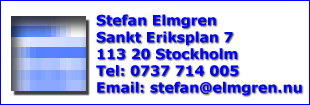
<style>
.page{position:relative;width:310px;height:105px;background:#ffffff}
.page>*{position:absolute;margin:0}
.t1{font:14px "Verdana-Bold";color:#0000ff}
</style>
<div class="page">
<p class="t1" style="left:96px;top:14px;width:206px;height:82px">Stefan Elmgren<br>Sankt Eriksplan 7<br>113 20 Stockholm<br>Tel: 0737 714 005<br>Email: stefan@elmgren.nu</p>
</div>
